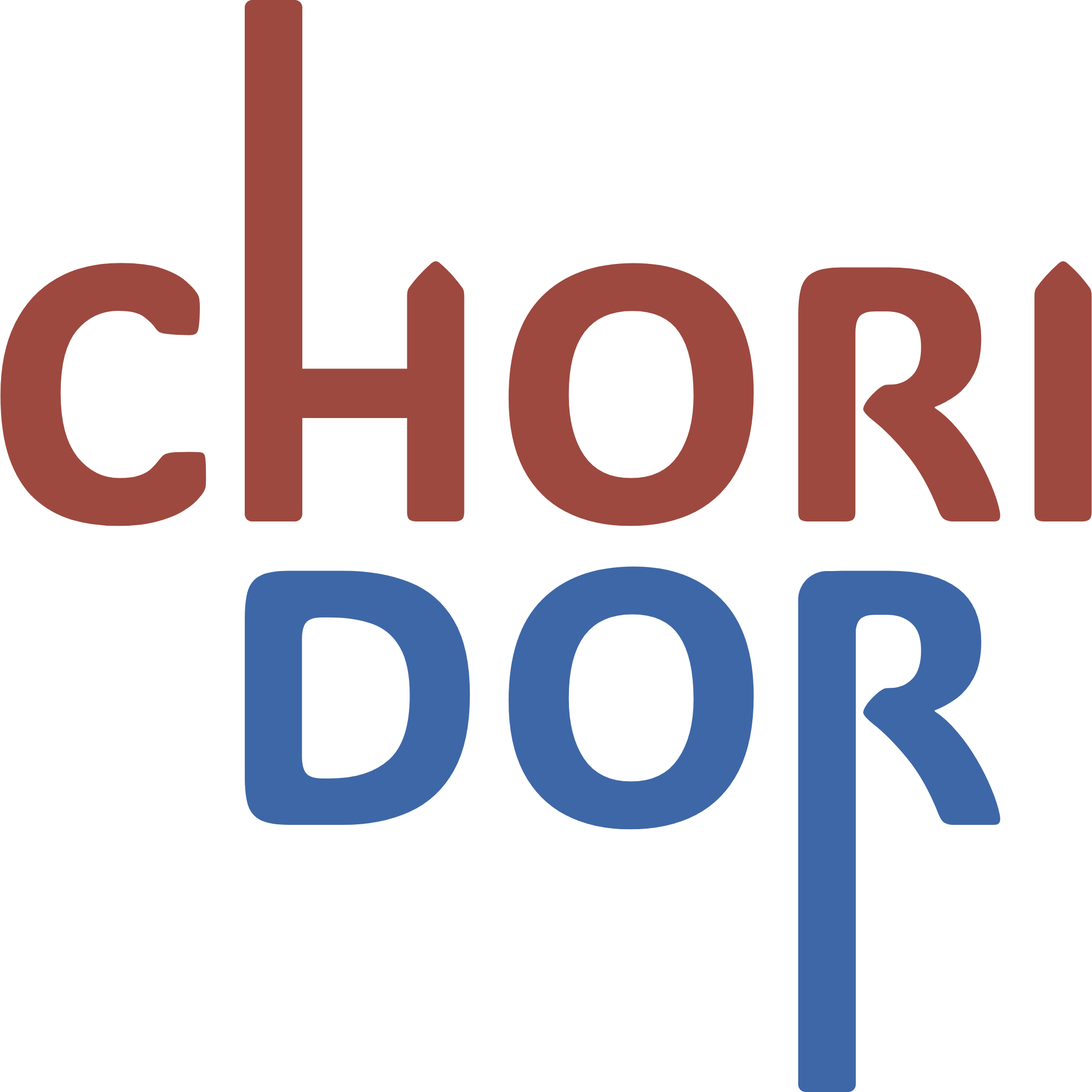
<style>
.page{position:relative;width:1092px;height:1092px;background:#ffffff}
.page>*{position:absolute;margin:0}
.t1{font:362.8px "ADLaMDisplay-Regular";color:#9d493f}
.t2{font:362.8px "ADLaMDisplay-Regular";color:#3e67a7}
</style>
<div class="page">
<p class="t1" style="left:0px;top:261px;width:1092px;height:265px">CHORI</p>
<p class="t2" style="left:508px;top:566px;width:246px;height:264px">O</p>
<p class="t2" style="left:245px;top:571px;width:225px;height:254px">D</p>
<p class="t2" style="left:798px;top:571px;width:203px;height:254px">R</p>
</div>
